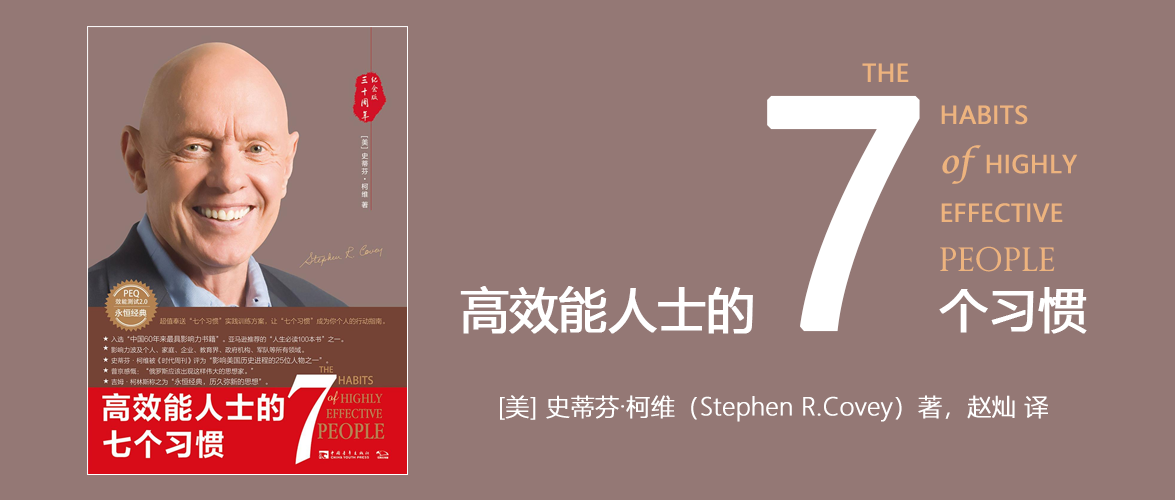
<style>
.page{position:relative;width:1175px;height:500px;background:#947875}
.page>*{position:absolute;margin:0}
.t1{font:24px "MicrosoftYaHei";color:#edb37e;font-weight:bold}
.t2{font:32px "LucidaCalligraphy-Italic";color:#edb37e;font-weight:bold}
.t3{font:32px "PerpetuaTitlingMT-Light";color:#edb37e;font-weight:bold}
.t4{font:48px "MicrosoftYaHei";color:#ffffff;font-weight:bold}
.t5{font:300px "MicrosoftYaHei";color:#ffffff;font-weight:bold}
.t6{font:24px "MicrosoftYaHeiLight";color:#ffffff;font-weight:bold}
</style>
<div class="page">
<p class="t1" style="left:862px;top:63px;width:215px;height:209px">THE<br>          HABITS<br>          <span class="t2">of </span>HIGHLY<br>          EFFECTIVE<br>          <span class="t3">PEOPLE</span></p>
<p class="t4" style="left:460px;top:95px;width:627px;height:239px">高效能人士的<span class="t5">7</span>个习惯</p>
<p class="t6" style="left:500px;top:395px;width:548px;height:27px">[美] 史蒂芬·柯维（Stephen R.Covey）著，赵灿 译</p>
</div>
